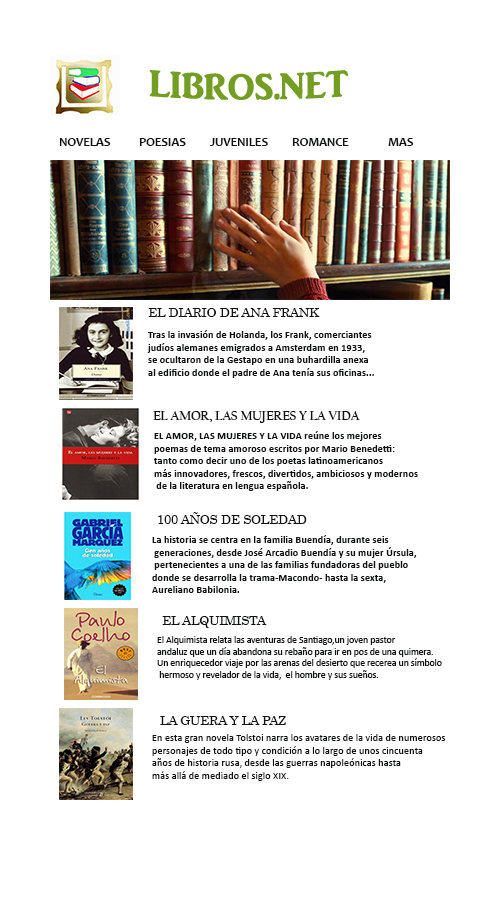
<style>
.page{position:relative;width:500px;height:900px;background:#ffffff}
.page>*{position:absolute;margin:0}
.t1{font:12.5px "Candara-Bold";color:#101312}
.t2{font:12.5px "Century";color:#101312}
.t3{font:10.4px "Calibri-Bold";color:#101312}
.t4{font:12.5px "CalifornianFB-Bold";color:#101312}
.t5{font:9.6px "Calibri";color:#101312}
.t6{font:10.4px "Calibri";color:#101312}
</style>
<div class="page">
<p class="t1" style="left:59px;top:138px;width:52px;height:8px">NOVELAS</p>
<p class="t1" style="left:139px;top:138px;width:47px;height:8px">POESIAS</p>
<p class="t1" style="left:210px;top:138px;width:58px;height:8px">JUVENILES</p>
<p class="t1" style="left:292px;top:138px;width:57px;height:8px">ROMANCE</p>
<p class="t1" style="left:388px;top:138px;width:26px;height:8px">MAS</p>
<p class="t2" style="left:148px;top:308px;width:172px;height:9px">EL DIARIO DE ANA FRANK</p>
<p class="t3" style="left:147px;top:330px;width:227px;height:48px">Tras la invasión de Holanda, los Frank, comerciantes <br>judíos alemanes emigrados a Amsterdam en 1933, <br>se ocultaron de la Gestapo en una buhardilla anexa <br>al edificio donde el padre de Ana tenía sus oficinas...</p>
<p class="t4" style="left:153px;top:411px;width:207px;height:12px">EL AMOR, LAS MUJERES Y LA VIDA</p>
<p class="t3" style="left:154px;top:431px;width:264px;height:60px">EL AMOR, LAS MUJERES Y LA VIDA reúne los mejores <br>poemas de tema amoroso escritos por Mario Benedetti: <br>tanto como decir uno de los poetas latinoamericanos <br>más innovadores, frescos, divertidos, ambiciosos y modernos<br> de la literatura en lengua española.</p>
<p class="t2" style="left:158px;top:512px;width:149px;height:12px">100 AÑOS DE SOLEDAD</p>
<p class="t3" style="left:152px;top:535px;width:265px;height:58px">La historia se centra en la familia Buendía, durante seis<br> generaciones, desde José Arcadio Buendía y su mujer Úrsula,<br> pertenecientes a una de las familias fundadoras del pueblo <br>donde se desarrolla la trama-Macondo- hasta la sexta, <br>Aureliano Babilonia.</p>
<p class="t2" style="left:162px;top:616px;width:105px;height:12px">EL ALQUIMISTA</p>
<p class="t5" style="left:157px;top:636px;width:285px;height:44px">El Alquimista relata las aventuras de Santiago,un joven pastor <br>andaluz que un día abandona su rebaño para ir en pos de una quimera. <br>Un enriquecedor viaje por las arenas del desierto que recerea un símbolo<br> hermoso y revelador de la vida,  el hombre y sus sueños.</p>
<p class="t2" style="left:160px;top:716px;width:126px;height:9px">LA GUERA Y LA PAZ</p>
<p class="t6" style="left:152px;top:734px;width:294px;height:47px">En esta gran novela Tolstoi narra los avatares de la vida de numerosos <br>personajes de todo tipo y condición a lo largo de unos cincuenta <br>años de historia rusa, desde las guerras napoleónicas hasta <br>más allá de mediado el siglo XIX.</p>
</div>
